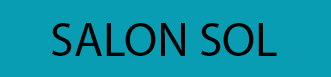
<style>
.page{position:relative;width:331px;height:77px;background:#099db3}
.page>*{position:absolute;margin:0}
.t1{font:48px "MyriadPro-Regular";color:#000000}
</style>
<div class="page">
<p class="t1" style="left:52px;top:23px;width:225px;height:33px">SALON SOL</p>
</div>
